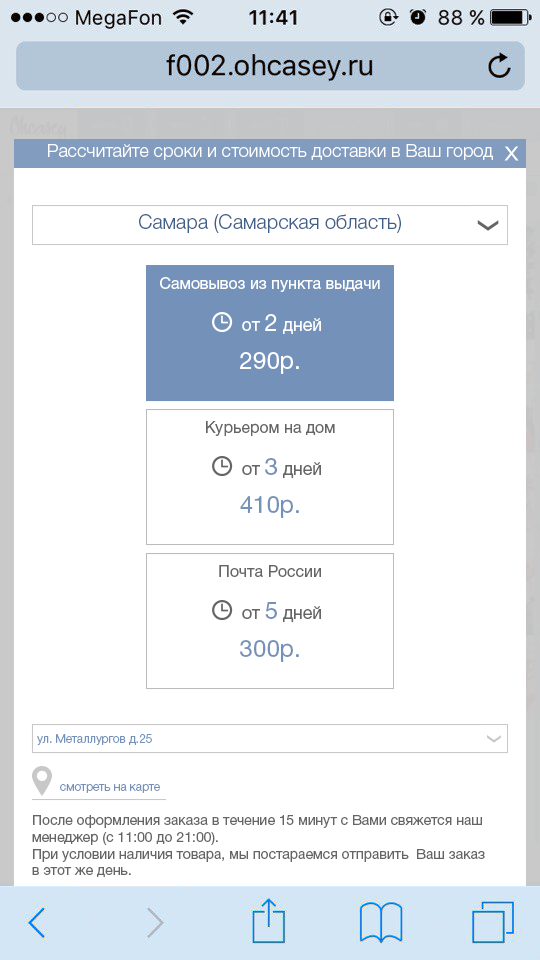
<style>
.page{position:relative;width:540px;height:960px;background:#ffffff}
.page>*{position:absolute;margin:0}
.t1{font:18px "HelveticaNeueCyr-Light";color:#ffffff}
.t2{font:20px "HelveticaNeueCyr-Light";color:#405e88}
.t3{font:16px "HelveticaNeueCyr-Roman";color:#ffffff}
.t4{font:17.7px "HelveticaNeueCyr-Roman";color:#ffffff}
.t5{font:23.6px "HelveticaNeueCyr-Roman";color:#ffffff}
.t6{font:24px "HelveticaNeueCyr-Roman";color:#ffffff}
.t7{font:16px "HelveticaNeueCyr-Roman";color:#656565}
.t8{font:17.7px "HelveticaNeueCyr-Roman";color:#656565}
.t9{font:23.6px "HelveticaNeueCyr-Roman";color:#7491b9}
.t10{font:24px "HelveticaNeueCyr-Roman";color:#7491b9}
.t11{font:12px "HelveticaNeueCyr-Light";color:#7491b9}
.t12{font:14px "HelveticaNeueCyr-Roman";color:#656565}
</style>
<div class="page">
<p class="t1" style="left:48px;top:144px;width:445px;height:16px">Рассчитайте сроки и стоимость доставки в Ваш город</p>
<p class="t2" style="left:139px;top:214px;width:262px;height:19px">Самара (Самарская область)</p>
<p class="t3" style="left:160px;top:277px;width:220px;height:15px">Самовывоз из пункта выдачи</p>
<p class="t4" style="left:242px;top:314px;width:79px;height:20px">от <span class="t5">2</span> дней</p>
<p class="t6" style="left:240px;top:352px;width:59px;height:22px">290р.</p>
<p class="t7" style="left:206px;top:421px;width:129px;height:15px">Курьером на дом</p>
<p class="t8" style="left:242px;top:458px;width:79px;height:20px">от <span class="t9">3</span> дней</p>
<p class="t10" style="left:240px;top:496px;width:59px;height:22px">410р.</p>
<p class="t7" style="left:219px;top:565px;width:102px;height:12px">Почта России</p>
<p class="t8" style="left:242px;top:602px;width:79px;height:20px">от <span class="t9">5</span> дней</p>
<p class="t10" style="left:240px;top:640px;width:59px;height:22px">300р.</p>
<p class="t11" style="left:37px;top:734px;width:115px;height:11px">ул. Металлургов д.25</p>
<p class="t11" style="left:60px;top:784px;width:100px;height:9px">смотреть на карте</p>
<p class="t12" style="left:32px;top:815px;width:453px;height:62px">После оформления заказа в течение 15 минут с Вами свяжется наш<br>менеджер (с 11:00 до 21:00).<br>При условии наличия товара, мы постараемся отправить  Ваш заказ <br>в этот же день.</p>
</div>
